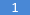
<style>
.page{position:relative;width:30px;height:15px;background:#4988d6}
.page>*{position:absolute;margin:0}
.t1{font:14px "Calibri";color:#ffffff}
</style>
<div class="page">
<p class="t1" style="left:12px;top:3px;width:6px;height:9px">1</p>
</div>
